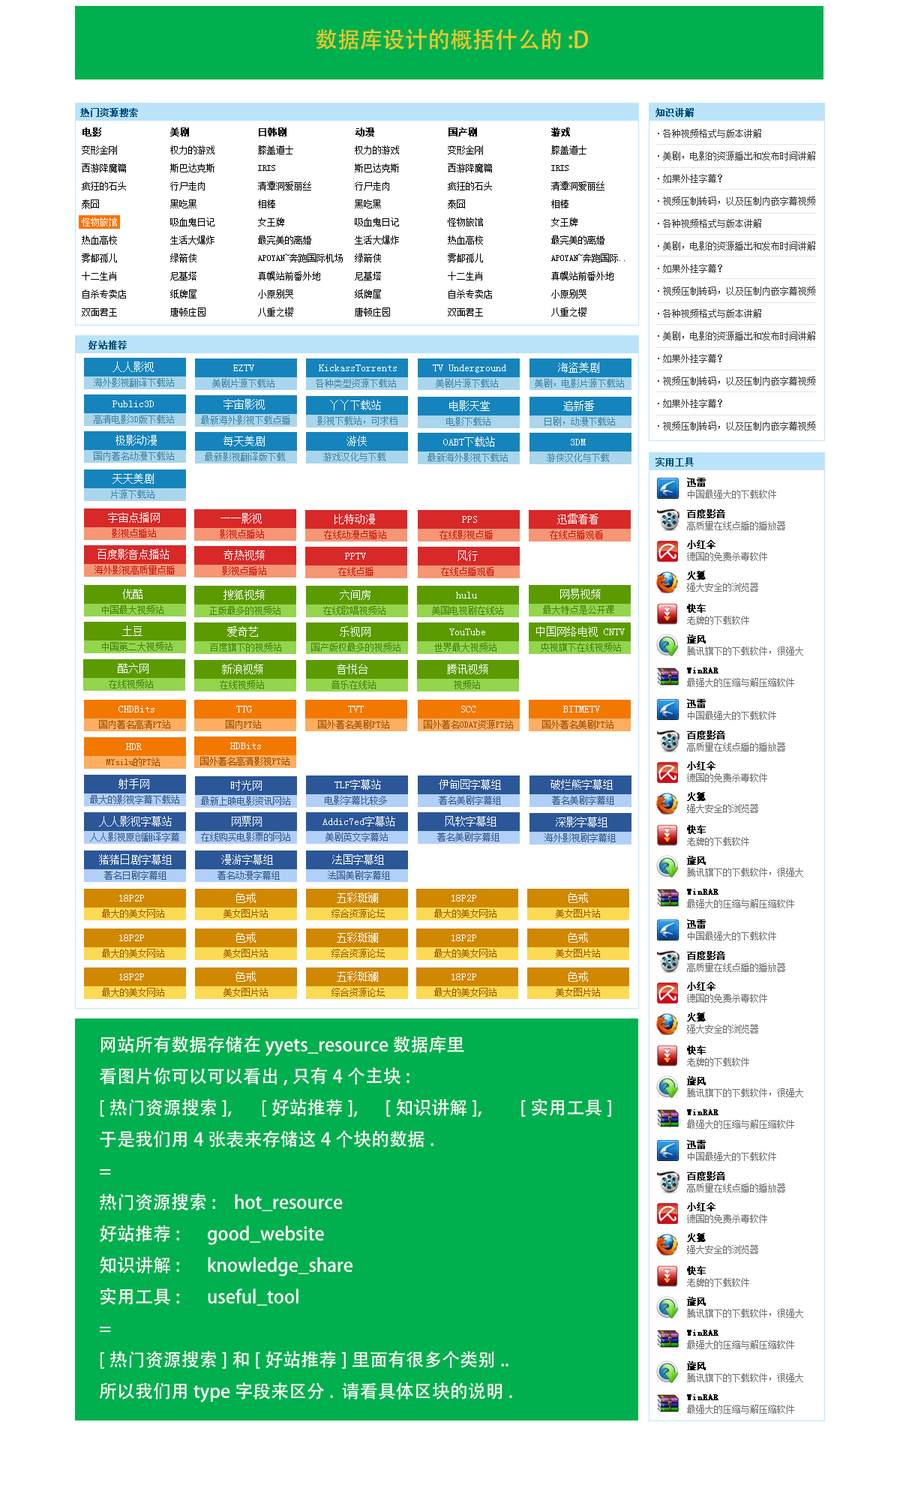
<style>
.page{position:relative;width:900px;height:1500px;background:#ffffff}
.page>*{position:absolute;margin:0}
.t1{font:22.5px "AdobeHeitiStd-Regular";color:#eec82a}
.t2{font:9px "NSimSun";color:#005281;font-weight:bold}
.t3{font:9px "NSimSun";color:#010101;font-weight:bold}
.t4{font:9px/22.5px "NSimSun";color:#3d3d3d}
.t5{font:9px/18px "NSimSun";color:#010101}
.t6{font:9px/18px "NSimSun";color:#ffffff}
.t7{font:9px/18px "NSimSun";color:#000000}
.t8{font:10.5px "SimSun";color:#ffffff}
.t9{font:9px "NSimSun";color:#4084a6}
.t10{font:9px/12px "NSimSun";color:#6e6e6e}
.t11{font:9px/12px "NSimSun";color:#010101;font-weight:bold}
.t12{font:9px "NSimSun";color:#c91818}
.t13{font:9px "NSimSun";color:#44820d}
.t14{font:9px "NSimSun";color:#9e4e00}
.t15{font:9px "NSimSun";color:#35598d}
.t16{font:9px "NSimSun";color:#a35400}
.t17{font:18px "AdobeHeitiStd-Regular";color:#ffffff}
</style>
<div class="page">
<p class="t1" style="left:316px;top:28px;width:272px;height:22px">数据库设计的概括什么的 :D</p>
<p class="t2" style="left:80px;top:108px;width:58px;height:9px">热门资源搜索</p>
<p class="t2" style="left:656px;top:108px;width:38px;height:9px">知识讲解</p>
<p class="t3" style="left:82px;top:128px;width:488px;height:8px">电影             美剧             日韩剧             动漫              国产剧              游戏</p>
<p class="t4" style="left:658px;top:129px;width:157px;height:301px">·各种视频格式与版本讲解<br>·美剧，电影的资源播出和发布时间讲解<br>·如果外挂字幕？<br>·视频压制转码，以及压制内嵌字幕视频<br>·各种视频格式与版本讲解<br>·美剧，电影的资源播出和发布时间讲解<br>·如果外挂字幕？<br>·视频压制转码，以及压制内嵌字幕视频<br>·各种视频格式与版本讲解<br>·美剧，电影的资源播出和发布时间讲解<br>·如果外挂字幕？<br>·视频压制转码，以及压制内嵌字幕视频<br>·如果外挂字幕？<br>·视频压制转码，以及压制内嵌字幕视频</p>
<p class="t5" style="left:82px;top:146px;width:44px;height:170px">变形金刚<br>西游降魔篇<br>疯狂的石头<br>泰囧<br><span class="t6">怪物旅馆<br></span>热血高校<br>雾都孤儿<br>十二生肖<br>自杀专卖店<br>双面君王</p>
<p class="t7" style="left:170px;top:146px;width:44px;height:170px">权力的游戏<br>斯巴达克斯<br>行尸走肉<br>黑吃黑<br>吸血鬼日记<br>生活大爆炸<br>绿箭侠<br>尼基塔<br>纸牌屋<br>唐顿庄园</p>
<p class="t7" style="left:258px;top:146px;width:85px;height:170px">膝盖道士<br>IRIS<br>清潭洞爱丽丝<br>相棒<br>女王牌<br>最完美的离婚<br>APOYAN~奔跑国际机场<br>真幌站前番外地<br>小原别哭<br>八重之樱</p>
<p class="t7" style="left:355px;top:146px;width:44px;height:170px">权力的游戏<br>斯巴达克斯<br>行尸走肉<br>黑吃黑<br>吸血鬼日记<br>生活大爆炸<br>绿箭侠<br>尼基塔<br>纸牌屋<br>唐顿庄园</p>
<p class="t7" style="left:448px;top:146px;width:44px;height:170px">变形金刚<br>西游降魔篇<br>疯狂的石头<br>泰囧<br>怪物旅馆<br>热血高校<br>雾都孤儿<br>十二生肖<br>自杀专卖店<br>双面君王</p>
<p class="t7" style="left:551px;top:146px;width:74px;height:170px">膝盖道士<br>IRIS<br>清潭洞爱丽丝<br>相棒<br>女王牌<br>最完美的离婚<br>APOYAN~奔跑国际..<br>真幌站前番外地<br>小原别哭<br>八重之樱</p>
<p class="t2" style="left:88px;top:340px;width:39px;height:10px">好站推荐</p>
<p class="t8" style="left:112px;top:362px;width:42px;height:10px">人人影视</p>
<p class="t8" style="left:233px;top:364px;width:21px;height:7px">EZTV</p>
<p class="t8" style="left:319px;top:364px;width:78px;height:7px">KickassTorrents</p>
<p class="t8" style="left:433px;top:364px;width:73px;height:9px">TV Underground</p>
<p class="t8" style="left:558px;top:362px;width:41px;height:11px">海盗美剧</p>
<p class="t9" style="left:94px;top:378px;width:80px;height:9px">海外影视翻译下载站</p>
<p class="t9" style="left:212px;top:379px;width:62px;height:9px">美剧片源下载站</p>
<p class="t9" style="left:316px;top:379px;width:80px;height:9px">各种类型资源下载站</p>
<p class="t9" style="left:436px;top:379px;width:62px;height:9px">美剧片源下载站</p>
<p class="t9" style="left:535px;top:379px;width:89px;height:9px">美剧，电影片源下载站</p>
<p class="t8" style="left:112px;top:400px;width:42px;height:7px">Public3D</p>
<p class="t8" style="left:224px;top:399px;width:41px;height:11px">宇宙影视</p>
<p class="t8" style="left:330px;top:400px;width:51px;height:10px">丫丫下载站</p>
<p class="t8" style="left:449px;top:400px;width:41px;height:11px">电影天堂</p>
<p class="t8" style="left:563px;top:400px;width:31px;height:11px">追新番</p>
<p class="t9" style="left:94px;top:415px;width:80px;height:9px">高清电影3D版下载站</p>
<p class="t9" style="left:201px;top:416px;width:89px;height:8px">最新海外影视下载点播</p>
<p class="t9" style="left:317px;top:416px;width:81px;height:9px">影视下载站，可求档</p>
<p class="t9" style="left:446px;top:417px;width:44px;height:9px">电影下载站</p>
<p class="t9" style="left:544px;top:417px;width:71px;height:9px">日剧，动漫下载站</p>
<p class="t8" style="left:116px;top:435px;width:41px;height:11px">极影动漫</p>
<p class="t9" style="left:94px;top:452px;width:80px;height:8px">国内著名动漫下载站</p>
<p class="t2" style="left:656px;top:458px;width:38px;height:8px">实用工具</p>
<p class="t10" style="left:687px;top:478px;width:89px;height:21px"><span class="t11">迅雷<br></span>中国最强大的下载软件</p>
<p class="t10" style="left:687px;top:509px;width:98px;height:21px"><span class="t11">百度影音<br></span>高质量在线点播的播放器</p>
<p class="t8" style="left:108px;top:512px;width:52px;height:11px">宇宙点播网</p>
<p class="t12" style="left:112px;top:529px;width:44px;height:9px">影视点播站</p>
<p class="t10" style="left:687px;top:540px;width:80px;height:21px"><span class="t11">小红伞<br></span>德国的免费杀毒软件</p>
<p class="t10" style="left:687px;top:571px;width:71px;height:21px"><span class="t11">火狐<br></span>强大安全的浏览器</p>
<p class="t8" style="left:122px;top:589px;width:20px;height:10px">优酷</p>
<p class="t13" style="left:102px;top:605px;width:62px;height:9px">中国最大视频站</p>
<p class="t10" style="left:687px;top:604px;width:62px;height:21px"><span class="t11">快车<br></span>老牌的下载软件</p>
<p class="t10" style="left:687px;top:634px;width:116px;height:22px"><span class="t11">旋风<br></span>腾讯旗下的下载软件，很强大</p>
<p class="t10" style="left:687px;top:668px;width:107px;height:19px"><span class="t11">WinRAR<br></span>最强大的压缩与解压缩软件</p>
<p class="t8" style="left:118px;top:706px;width:36px;height:6px">CHDBits</p>
<p class="t14" style="left:99px;top:720px;width:71px;height:9px">国内著名高清PT站</p>
<p class="t8" style="left:118px;top:778px;width:31px;height:11px">射手网</p>
<p class="t15" style="left:90px;top:795px;width:89px;height:9px">最大的影视字幕下载站</p>
<p class="t8" style="left:236px;top:892px;width:20px;height:11px">色戒</p>
<p class="t8" style="left:337px;top:892px;width:41px;height:11px">五彩斑斓</p>
<p class="t8" style="left:119px;top:895px;width:25px;height:7px">18P2P</p>
<p class="t16" style="left:102px;top:909px;width:62px;height:9px">最大的美女网站</p>
<p class="t16" style="left:224px;top:909px;width:44px;height:9px">美女图片站</p>
<p class="t16" style="left:332px;top:909px;width:53px;height:9px">综合资源论坛</p>
<p class="t17" style="left:99px;top:1036px;width:512px;height:366px">网站所有数据存储在 yyets_resource 数据库里<br>看图片你可以可以看出, 只有4个主块:<br>[热门资源搜索],  [好站推荐],     [知识讲解],      [实用工具]<br>于是我们用4张表来存储这4个块的数据.<br>=<br>热门资源搜索:  hot_resource<br>好站推荐:  good_website<br>知识讲解:  knowledge_share<br>实用工具:  useful_tool<br>=<br>[热门资源搜索]和[好站推荐]里面有很多个类别.. <br>所以我们用type字段来区分.  请看具体区块的说明.</p>
</div>
